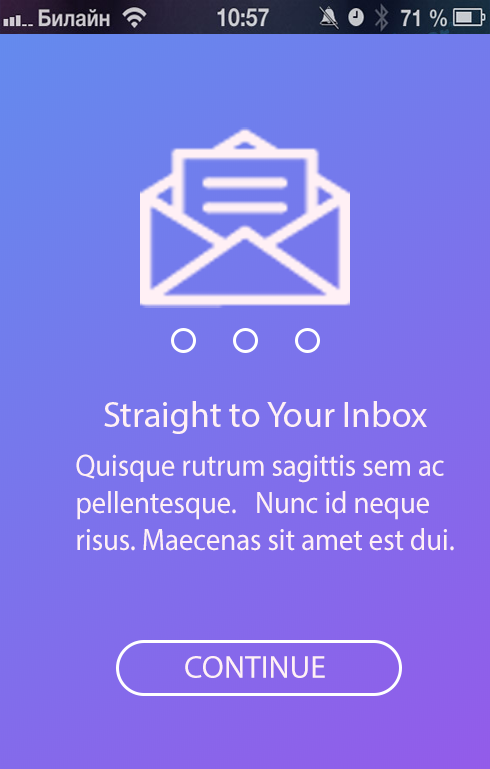
<style>
.page{position:relative;width:490px;height:769px}
.page>*{position:absolute;margin:0}
.t1{font:36px "MyriadPro-Regular";color:#fff0f5}
.t2{font:31px "MyriadPro-Regular";color:#fff0f5;scale:0.92 1}
.t3{font:32px "MyriadPro-Regular";color:#fff0f5}
</style>
<div class="page">
<p class="t1" style="left:104px;top:401px;width:323px;height:33px">Straight to Your Inbox</p>
<p class="t2" style="left:76px;top:454px;width:378px;height:97px">Quisque rutrum sagittis sem ac <br>pellentesque.   Nunc id neque <br>risus. Maecenas sit amet est dui.</p>
<p class="t3" style="left:185px;top:656px;width:140px;height:22px">CONTINUE</p>
</div>
